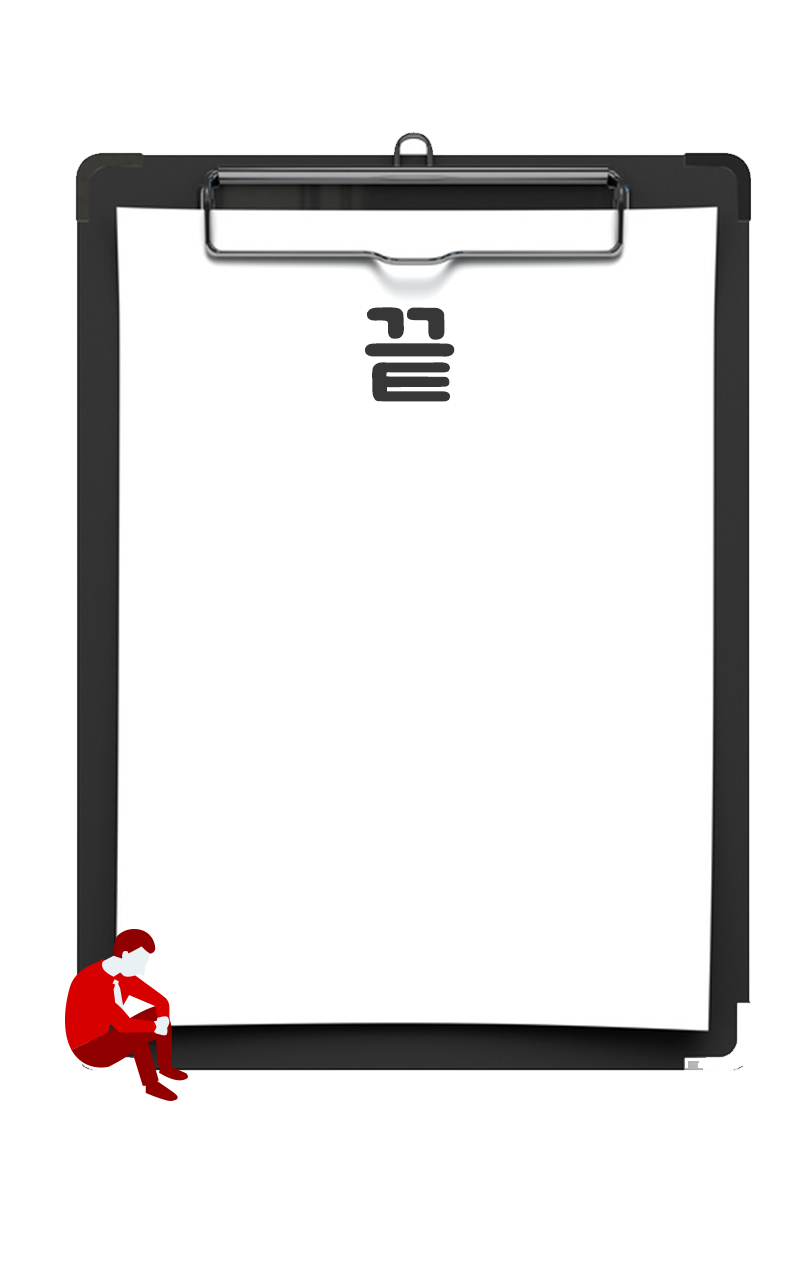
<style>
.page{position:relative;width:800px;height:1280px;background:#ffffff}
.page>*{position:absolute;margin:0}
.t1{font:117.8px "BMJUA";color:#373737}
</style>
<div class="page">
<p class="t1" style="left:365px;top:307px;width:90px;height:95px">끝</p>
</div>
